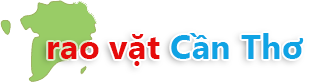
<style>
.page{position:relative;width:314px;height:82px;background:#ffffff}
.page>*{position:absolute;margin:0}
.t1{font:33.9px "SegoeUI-Bold";letter-spacing:0.011em;color:#e60b0b}
.t2{font:33.9px "SegoeUI-Bold";letter-spacing:0.011em;color:#10a3e4}
</style>
<div class="page">
<p class="t1" style="left:48px;top:33px;width:256px;height:33px">rao vặt <span class="t2">Cần Thơ</span></p>
</div>
